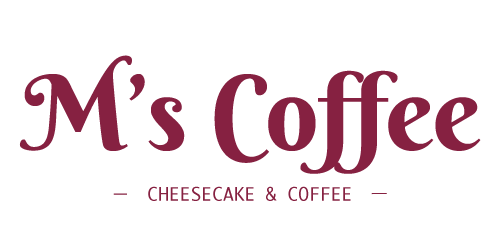
<style>
.page{position:relative;width:500px;height:250px;background:#ffffff}
.page>*{position:absolute;margin:0}
.t1{font:104.1px "BerkshireSwash-Regular";color:#862141}
.t2{font:18px "Ayuthaya";color:#862141}
.t3{font:18px "KozGoPr6N-Regular";color:#862141}
</style>
<div class="page">
<p class="t1" style="left:19px;top:55px;width:462px;height:119px">M’s Coffee</p>
<p class="t2" style="left:113px;top:186px;width:274px;height:15px"><span class="t3">−　</span>CHEESECAKE &amp; COFFEE<span class="t3">　ー</span></p>
</div>
